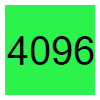
<style>
.page{position:relative;width:100px;height:100px;background:#2bf34c}
.page>*{position:absolute;margin:0}
.t1{font:40px "MicrosoftSansSerif";color:#000407}
</style>
<div class="page">
<p class="t1" style="left:7px;top:36px;width:87px;height:29px">4096</p>
</div>
